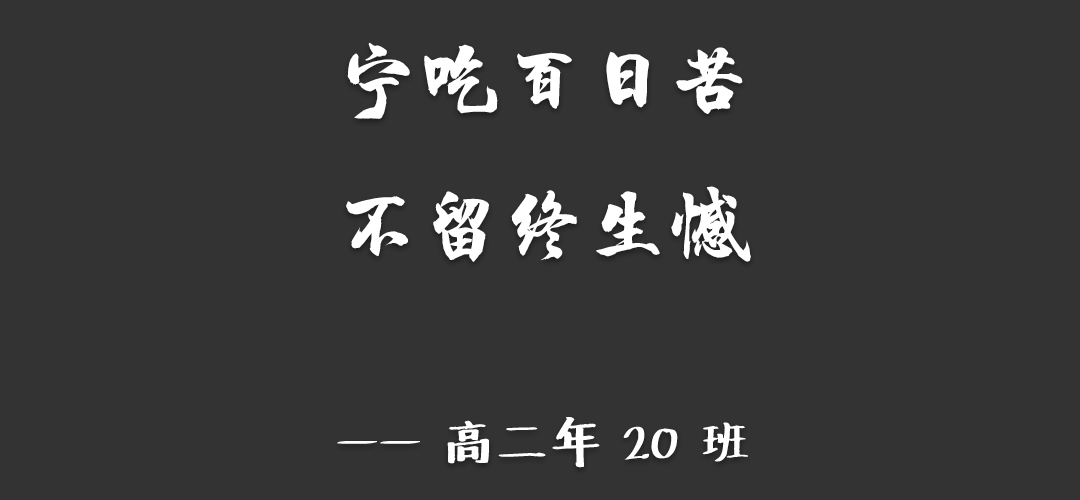
<style>
.page{position:relative;width:1080px;height:500px;background:#333333}
.page>*{position:absolute;margin:0}
.t1{font:83.3px "HYChengXingJ";color:#ffffff}
.t2{font:50px "Undefined";color:#ffffff}
</style>
<div class="page">
<p class="t1" style="left:337px;top:42px;width:414px;height:426px;text-align:center">宁吃百日苦<br>不留终生憾<br><span class="t2"><br>—— 高二年 20 班</span></p>
</div>
